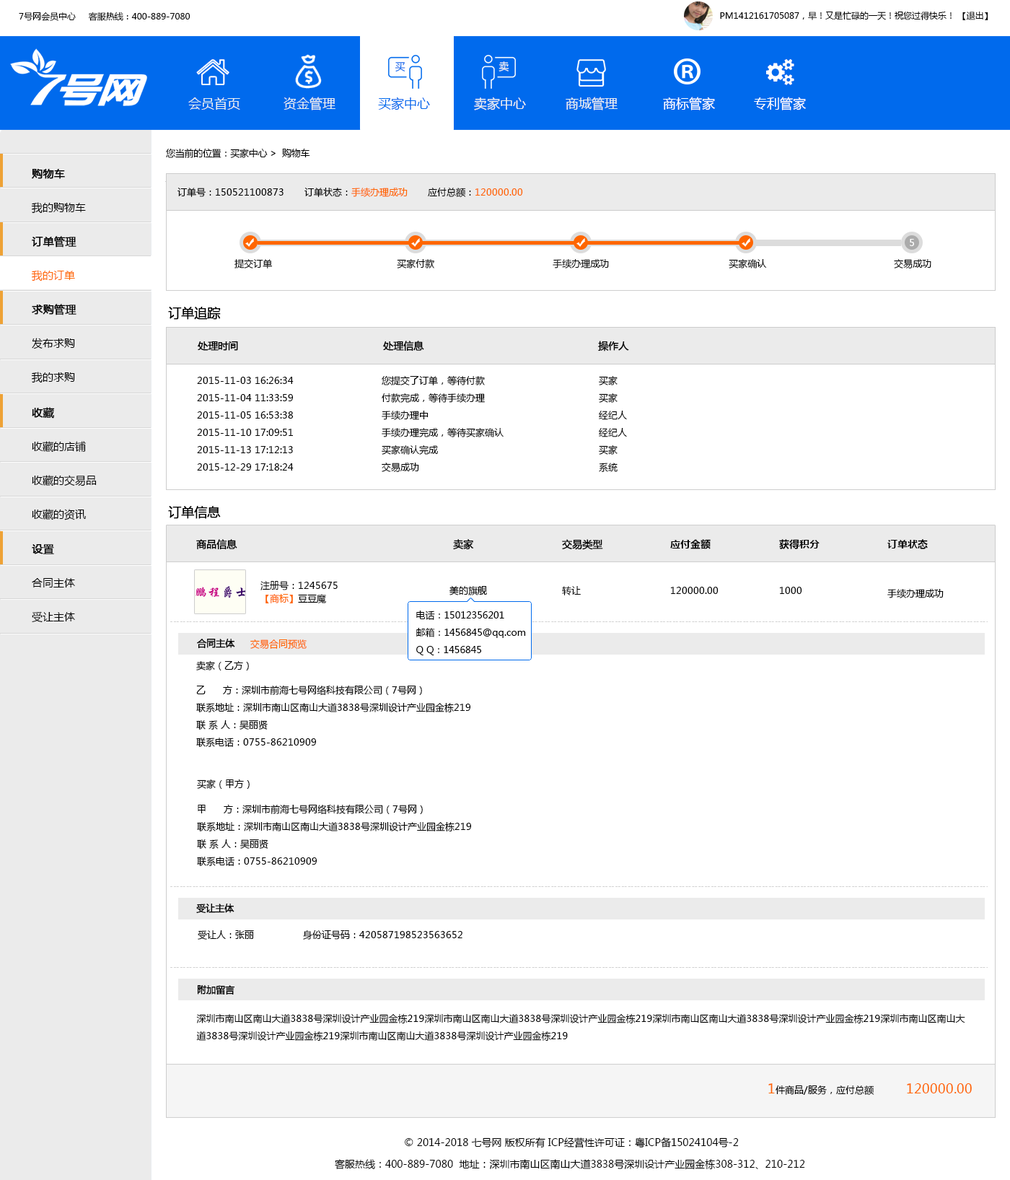
<style>
.page{position:relative;width:1010px;height:1180px;background:#ffffff}
.page>*{position:absolute;margin:0}
.t1{font:8.7px "MicrosoftYaHei";color:#000000}
.t2{font:10.1px "MicrosoftYaHei";color:#006aed}
.t3{font:10.1px "MicrosoftYaHei";color:#ecf0f1}
.t4{font:13px "MicrosoftYaHei";color:#ecf0f1}
.t5{font:13px "MicrosoftYaHei";color:#006aed}
.t6{font:13px "MicrosoftYaHei";color:#ffffff}
.t7{font:9.4px "MicrosoftYaHei";letter-spacing:-0.02em;color:#000000}
.t8{font:10.8px/33.9px "MicrosoftYaHei";color:#000000}
.t9{font:10.8px/33.9px "MicrosoftYaHei";color:#000000;font-weight:bold}
.t10{font:9.4px "MicrosoftYaHei";color:#000000}
.t11{font:9.4px "MicrosoftYaHei";color:#ff6600}
.t12{font:10.8px/33.9px "MicrosoftYaHei";color:#ff6600}
.t13{font:9.4px "MicrosoftYaHei";color:#ffffff}
.t14{font:13px "MicrosoftYaHei";color:#000000;font-weight:bold}
.t15{font:10.1px "MicrosoftYaHei";color:#000000;font-weight:bold}
.t16{font:9.4px/17.3px "MicrosoftYaHei";color:#000000}
.t17{font:10.1px "MicrosoftYaHei-Bold";color:#000000}
.t18{font:9.4px/13px "MicrosoftYaHei";color:#000000}
.t19{font:9.4px/13px "MicrosoftYaHei";color:#ff6600}
.t20{font:9.4px "MicrosoftYaHei";color:#000000;font-weight:bold}
.t21{font:13px "MicrosoftYaHei";color:#ff6600}
.t22{font:10.1px/21.7px "MicrosoftYaHei";color:#000000}
</style>
<div class="page">
<p class="t1" style="left:19px;top:12px;width:172px;height:9px">7号网会员中心     客服热线：400-889-7080</p>
<p class="t1" style="left:720px;top:12px;width:269px;height:8px">PM1412161705087，早！又是忙碌的一天！祝您过得快乐！ 【退出】</p>
<p class="t2" style="left:395px;top:62px;width:11px;height:10px">买</p>
<p class="t3" style="left:499px;top:61px;width:11px;height:10px">卖</p>
<p class="t4" style="left:188px;top:97px;width:52px;height:13px">会员首页</p>
<p class="t4" style="left:284px;top:97px;width:52px;height:13px">资金管理</p>
<p class="t5" style="left:378px;top:97px;width:52px;height:13px">买家中心</p>
<p class="t4" style="left:474px;top:97px;width:52px;height:13px">卖家中心</p>
<p class="t4" style="left:566px;top:97px;width:52px;height:13px">商城管理</p>
<p class="t6" style="left:663px;top:97px;width:52px;height:13px">商标管家</p>
<p class="t6" style="left:754px;top:97px;width:52px;height:13px">专利管家</p>
<p class="t7" style="left:166px;top:148px;width:144px;height:10px">您当前的位置：买家中心 &gt;  购物车</p>
<p class="t8" style="left:31px;top:169px;width:55px;height:45px"><span class="t9">购物车<br></span>我的购物车</p>
<p class="t10" style="left:178px;top:188px;width:345px;height:10px">订单号：150521100873       订单状态：<span class="t11">手续办理成功       </span>应付总额：<span class="t11">120000.00</span></p>
<p class="t9" style="left:31px;top:236px;width:46px;height:45px">订单管理<br><span class="t12">我的订单</span></p>
<p class="t13" style="left:910px;top:239px;width:4px;height:7px">5</p>
<p class="t10" style="left:235px;top:259px;width:38px;height:9px">提交订单</p>
<p class="t10" style="left:397px;top:259px;width:38px;height:9px">买家付款</p>
<p class="t10" style="left:553px;top:259px;width:56px;height:9px">手续办理成功</p>
<p class="t10" style="left:729px;top:259px;width:38px;height:9px">买家确认</p>
<p class="t10" style="left:894px;top:259px;width:38px;height:9px">交易成功</p>
<p class="t8" style="left:31px;top:304px;width:46px;height:79px"><span class="t9">求购管理<br></span>发布求购<br>我的求购</p>
<p class="t14" style="left:168px;top:307px;width:53px;height:13px">订单追踪</p>
<p class="t15" style="left:198px;top:341px;width:431px;height:10px">处理时间                                      处理信息                                         操作人</p>
<p class="t16" style="left:197px;top:377px;width:97px;height:94px">2015-11-03 16:26:34<br>2015-11-04 11:33:59<br>2015-11-05 16:53:38<br>2015-11-10 17:09:51<br>2015-11-13 17:12:13<br>2015-12-29 17:18:24</p>
<p class="t16" style="left:382px;top:375px;width:122px;height:97px">您提交了订单，等待付款<br>付款完成，等待手续办理<br>手续办理中<br>手续办理完成，等待买家确认<br>买家确认完成<br>交易成功</p>
<p class="t16" style="left:599px;top:376px;width:28px;height:96px">买家<br>买家<br>经纪人<br>经纪人<br>买家<br>系统</p>
<p class="t8" style="left:32px;top:407px;width:65px;height:113px"><span class="t9">收藏<br></span>收藏的店铺<br>收藏的交易品<br>收藏的资讯</p>
<p class="t14" style="left:168px;top:506px;width:53px;height:13px">订单信息</p>
<p class="t8" style="left:32px;top:544px;width:43px;height:79px"><span class="t9">设置<br></span>合同主体<br>受让主体</p>
<p class="t15" style="left:196px;top:539px;width:41px;height:11px">商品信息</p>
<p class="t15" style="left:453px;top:539px;width:21px;height:11px">卖家</p>
<p class="t15" style="left:562px;top:539px;width:41px;height:11px">交易类型</p>
<p class="t17" style="left:671px;top:539px;width:40px;height:10px">应付金额</p>
<p class="t17" style="left:780px;top:539px;width:40px;height:10px">获得积分</p>
<p class="t17" style="left:888px;top:539px;width:40px;height:10px">订单状态</p>
<p class="t18" style="left:261px;top:581px;width:77px;height:22px">注册号：1245675<br><span class="t19">【商标】</span>豆豆魔</p>
<p class="t10" style="left:450px;top:586px;width:37px;height:9px">美的旗舰</p>
<p class="t10" style="left:562px;top:586px;width:19px;height:9px">转让</p>
<p class="t10" style="left:671px;top:587px;width:48px;height:7px">120000.00</p>
<p class="t10" style="left:780px;top:587px;width:23px;height:7px">1000</p>
<p class="t10" style="left:888px;top:589px;width:56px;height:9px">手续办理成功</p>
<p class="t16" style="left:416px;top:611px;width:110px;height:44px">电话：15012356201<br>邮箱：1456845@qq.com<br>Q Q：1456845</p>
<p class="t20" style="left:197px;top:639px;width:38px;height:10px">合同主体</p>
<p class="t11" style="left:250px;top:639px;width:57px;height:10px">交易合同预览</p>
<p class="t10" style="left:196px;top:661px;width:53px;height:10px">卖家（乙方）</p>
<p class="t16" style="left:196px;top:685px;width:275px;height:62px">乙      方：深圳市前海七号网络科技有限公司（7号网）<br>联系地址：深圳市南山区南山大道3838号深圳设计产业园金栋219<br>联 系 人：吴丽贤<br>联系电话：0755-86210909</p>
<p class="t10" style="left:197px;top:780px;width:53px;height:9px">买家（甲方）</p>
<p class="t16" style="left:197px;top:804px;width:274px;height:62px">甲      方：深圳市前海七号网络科技有限公司（7号网）<br>联系地址：深圳市南山区南山大道3838号深圳设计产业园金栋219<br>联 系 人：吴丽贤<br>联系电话：0755-86210909</p>
<p class="t20" style="left:196px;top:904px;width:39px;height:10px">受让主体</p>
<p class="t10" style="left:198px;top:930px;width:265px;height:10px">受让人：张丽                 身份证号码：420587198523563652</p>
<p class="t20" style="left:197px;top:985px;width:38px;height:10px">附加留言</p>
<p class="t16" style="left:196px;top:1014px;width:770px;height:27px">深圳市南山区南山大道3838号深圳设计产业园金栋219深圳市南山区南山大道3838号深圳设计产业园金栋219深圳市南山区南山大道3838号深圳设计产业园金栋219深圳市南山区南山大道3838号深圳设计产业园金栋219深圳市南山区南山大道3838号深圳设计产业园金栋219</p>
<p class="t10" style="left:769px;top:1083px;width:106px;height:13px"><span class="t21">1</span>件商品/服务，应付总额</p>
<p class="t21" style="left:907px;top:1083px;width:65px;height:10px">120000.00</p>
<p class="t22" style="left:335px;top:1137px;width:470px;height:33px;text-align:center">© 2014-2018 七号网 版权所有 ICP经营性许可证：粤ICP备15024104号-2<br>客服热线：400-889-7080  地址：深圳市南山区南山大道3838号深圳设计产业园金栋308-312、210-212</p>
</div>
